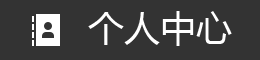
<style>
.page{position:relative;width:260px;height:60px;background:#333333}
.page>*{position:absolute;margin:0}
.t1{font:36px "MicrosoftYaHei";color:#ffffff}
</style>
<div class="page">
<p class="t1" style="left:88px;top:11px;width:144px;height:35px">个人中心</p>
</div>
